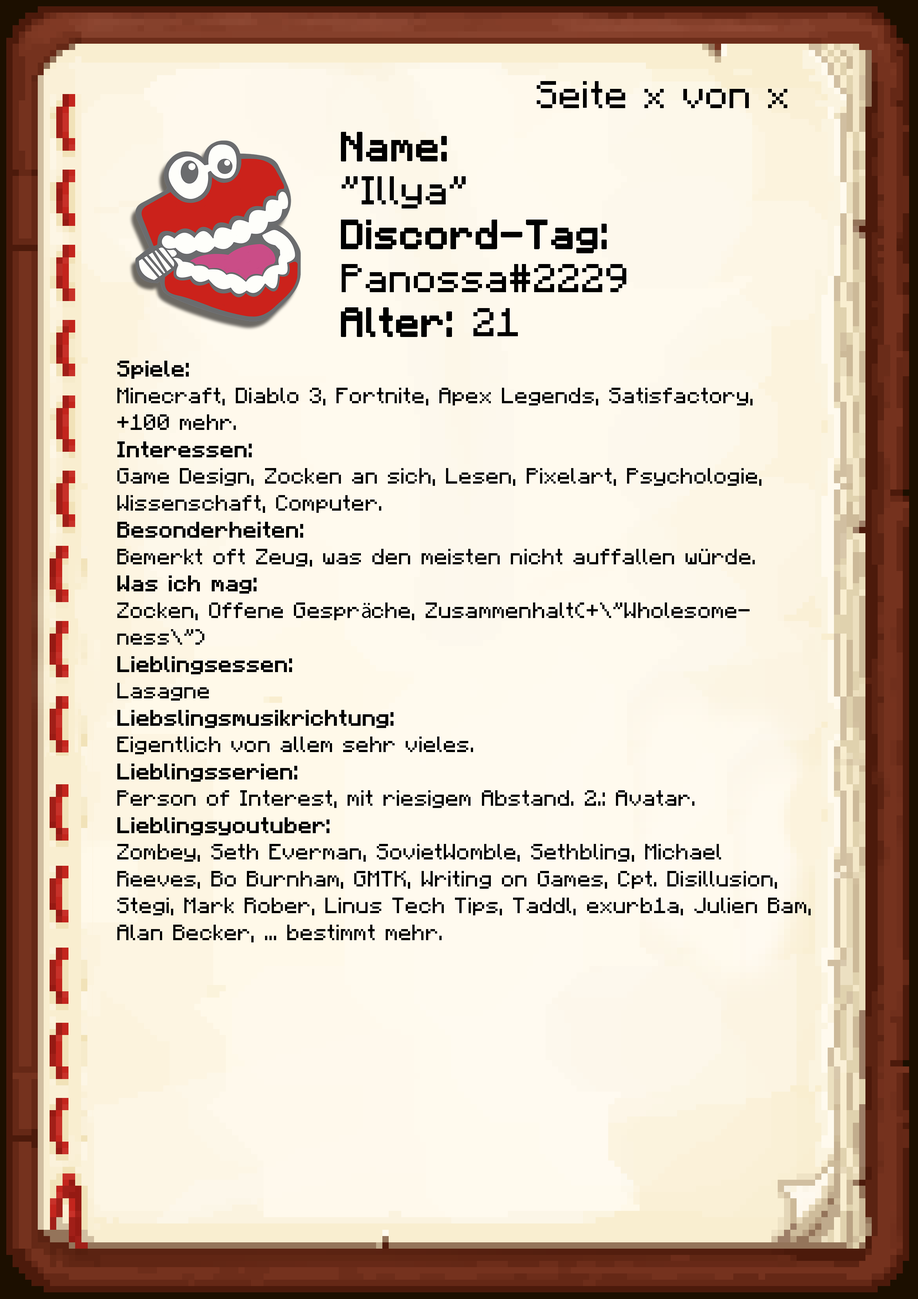
<style>
.page{position:relative;width:918px;height:1299px}
.page>*{position:absolute;margin:0}
.t1{font:38.6px "Minecraft-Regular";color:#000000}
.t2{font:40.1px/43.9px "Minecraft-Regular";color:#000000;font-weight:bold}
.t3{font:40.1px/43.9px "Minecraft-Regular";color:#000000}
.t4{font:22.4px "Minecraft-Regular";color:#000000}
.t5{font:22.4px "Minecraft-Regular";color:#000000;font-weight:bold}
.t6{font:22.4px "MyriadPro-Regular";color:#000000}
</style>
<div class="page">
<p class="t1" style="left:537px;top:81px;width:250px;height:27px">Seite x von x</p>
<p class="t2" style="left:341px;top:132px;width:285px;height:205px">Name:<br><span class="t3">"Illya"<br></span>Discord-Tag:<br><span class="t3">Panossa#2229<br></span>Alter: <span class="t3">21</span></p>
<p class="t4" style="left:117px;top:361px;width:694px;height:581px"><span class="t5">Spiele: <br></span>Minecraft, Diablo 3, Fortnite, Apex Legends, Satisfactory, +100 mehr.<br><span class="t5">Interessen:<br></span>Game Design, Zocken an sich, Lesen, Pixelart, Psychologie, Wissenschaft, Computer.<br><span class="t5">Besonderheiten:<br></span>Bemerkt oft Zeug, was den meisten nicht auffallen würde.<br><span class="t5">Was ich mag:<br></span>Zocken, Offene Gespr<span class="t6">ä</span>che, Zusammenhalt(+\"Wholesomeness\")<br><span class="t5">Lieblingsessen:<br></span>Lasagne<br><span class="t5">Liebslingsmusikrichtung:<br></span>Eigentlich von allem sehr vieles.<br><span class="t5">Lieblingsserien:<br></span>Person of Interest, mit riesigem Abstand. 2.: Avatar.<br><span class="t5">Lieblingsyoutuber:<br></span>Zombey, Seth Everman, SovietWomble, Sethbling, Michael Reeves, Bo Burnham, GMTK, Writing on Games, Cpt. Disillusion, Stegi, Mark Rober, Linus Tech Tips, Taddl, exurb1a, Julien Bam, Alan Becker, ... bestimmt mehr.</p>
</div>
